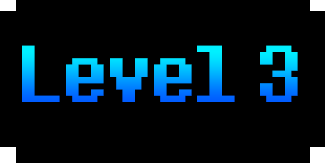
<style>
.page{position:relative;width:325px;height:163px;background:#000000}
.page>*{position:absolute;margin:0}
.t1{font:100px "8bitoperator-JVE"}
</style>
<div class="page">
<p class="t1" style="left:22px;top:45px;width:276px;height:57px">Level 3</p>
</div>
